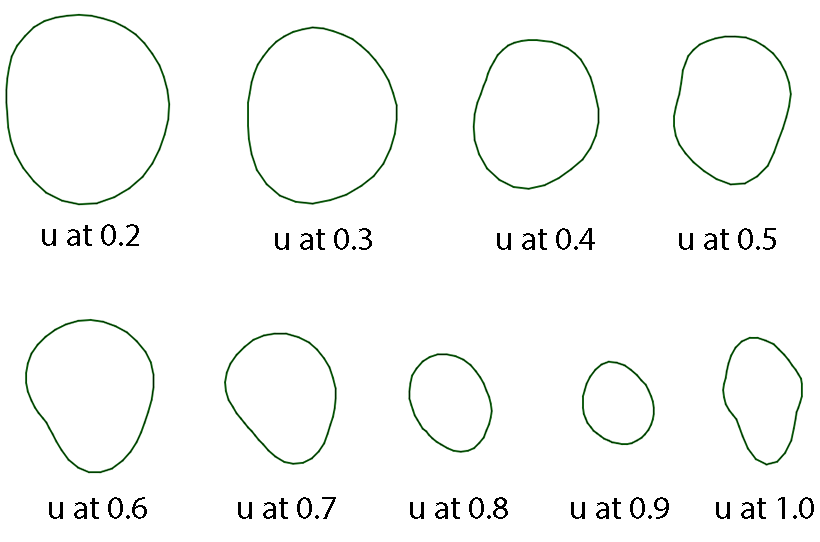
<style>
.page{position:relative;width:820px;height:542px;background:#ffffff}
.page>*{position:absolute;margin:0}
.t1{font:33.3px "MyriadPro-Regular";color:#000000}
</style>
<div class="page">
<p class="t1" style="left:42px;top:224px;width:97px;height:22px">u at 0.2</p>
<p class="t1" style="left:275px;top:228px;width:97px;height:22px">u at 0.3</p>
<p class="t1" style="left:497px;top:228px;width:98px;height:22px">u at 0.4</p>
<p class="t1" style="left:679px;top:228px;width:97px;height:22px">u at 0.5</p>
<p class="t1" style="left:49px;top:497px;width:98px;height:22px">u at 0.6</p>
<p class="t1" style="left:238px;top:497px;width:98px;height:22px">u at 0.7</p>
<p class="t1" style="left:410px;top:497px;width:98px;height:22px">u at 0.8</p>
<p class="t1" style="left:571px;top:497px;width:98px;height:22px">u at 0.9</p>
<p class="t1" style="left:716px;top:497px;width:98px;height:22px">u at 1.0</p>
</div>
